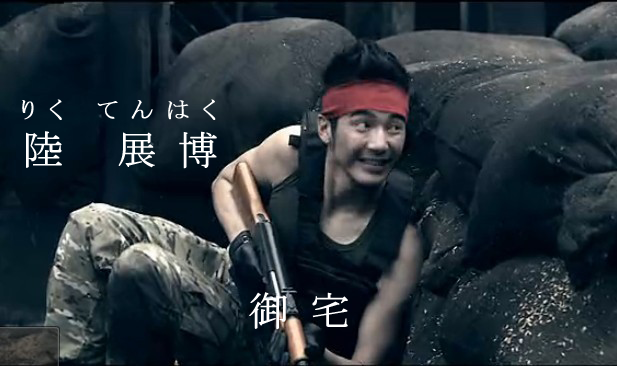
<style>
.page{position:relative;width:617px;height:366px}
.page>*{position:absolute;margin:0}
.t1{font:24px "MS-PMincho";letter-spacing:0.5em;color:#ffffff;font-weight:bold}
.t2{font:40px "MS-PMincho";letter-spacing:0.5em;color:#ffffff;font-weight:bold}
</style>
<div class="page">
<p class="t1" style="left:22px;top:99px;width:194px;height:21px">りく てんはく</p>
<p class="t2" style="left:26px;top:131px;width:191px;height:38px">陸 展博</p>
<p class="t2" style="left:249px;top:292px;width:99px;height:38px">御宅</p>
</div>
